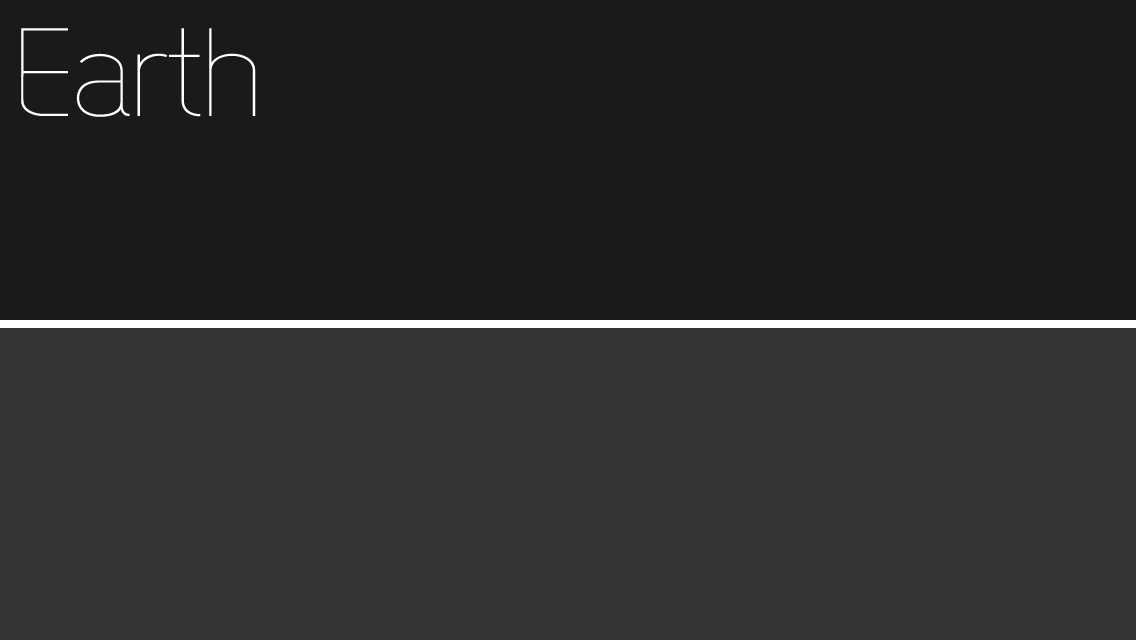
<style>
.page{position:relative;width:1136px;height:640px;background:#1a1a1a}
.page>*{position:absolute;margin:0}
.t1{font:125px "Dekar-Light";color:#ffffff}
</style>
<div class="page">
<p class="t1" style="left:21px;top:28px;width:235px;height:89px">Earth</p>
</div>
